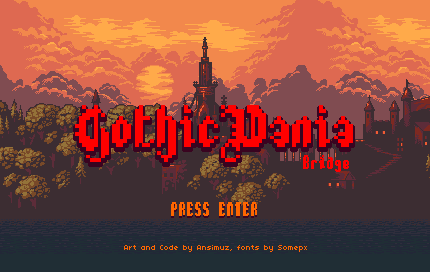
<style>
.page{position:relative;width:430px;height:272px;background:#3c2d32}
.page>*{position:absolute;margin:0}
.t1{font:24.2px "Phantex";color:#ff6600}
.t2{font:8.1px "04b03";color:#ff6600}
</style>
<div class="page">
<p class="t1" style="left:171px;top:204px;width:86px;height:14px">PRESS ENTER</p>
<p class="t1" style="left:171px;top:202px;width:86px;height:14px">PRESS ENTER</p>
<p class="t2" style="left:124px;top:245px;width:183px;height:7px">Art and Code by Ansimuz, fonts by Somepx</p>
</div>
